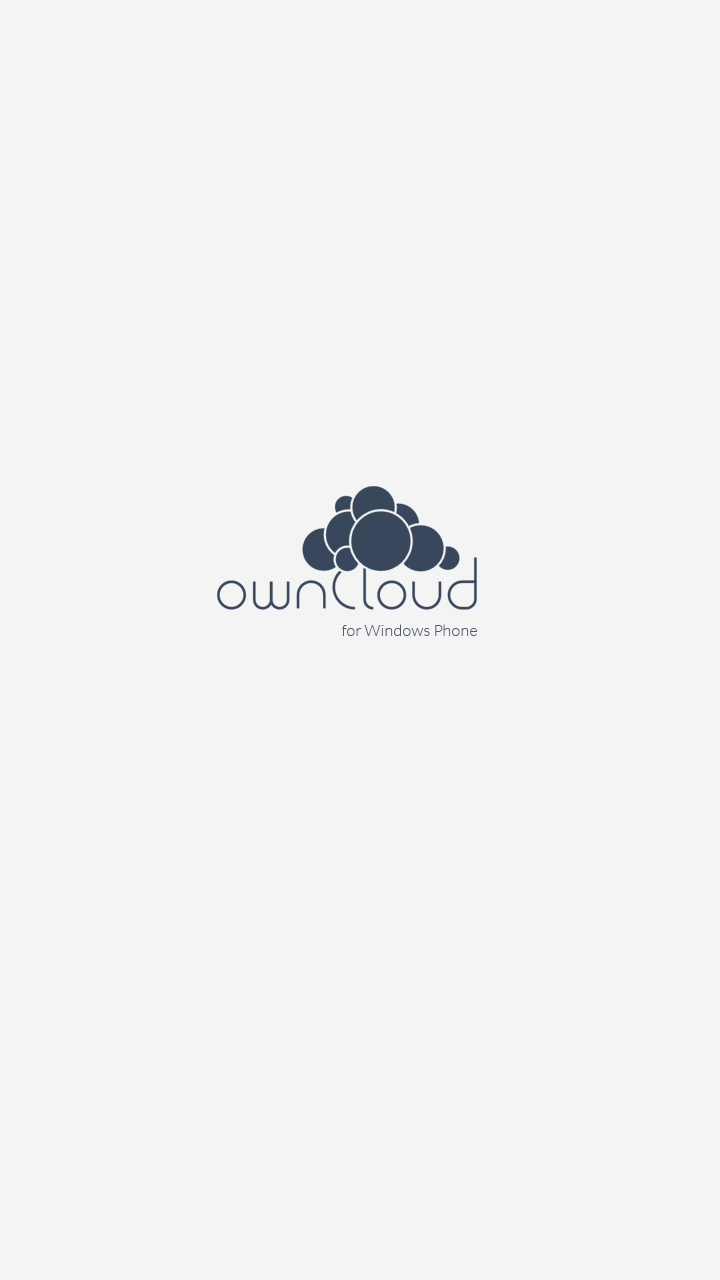
<style>
.page{position:relative;width:720px;height:1280px;background:#f4f4f4}
.page>*{position:absolute;margin:0}
.t1{font:16px "Lato-Light";color:#4f5c6f}
</style>
<div class="page">
<p class="t1" style="left:341px;top:624px;width:136px;height:12px">for Windows Phone</p>
</div>
